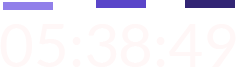
<style>
.page{position:relative;width:236px;height:67px;background:#ffffff}
.page>*{position:absolute;margin:0}
.t1{font:60px "Lato-Regular";color:#fff7f7}
</style>
<div class="page">
<p class="t1" style="left:0px;top:24px;width:236px;height:43px">05:38:49</p>
</div>
